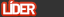
<style>
.page{position:relative;width:64px;height:17px;background:#333333}
.page>*{position:absolute;margin:0}
.t1{font:14.7px "Barlow-Bold";letter-spacing:-0.1em;color:#ffffff}
</style>
<div class="page">
<p class="t1" style="left:3px;top:1px;width:32px;height:14px">LÍDER</p>
</div>
